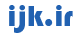
<style>
.page{position:relative;width:82px;height:35px;background:#ffffff}
.page>*{position:absolute;margin:0}
.t1{font:30px "Bauhaus93";color:#2161b1}
</style>
<div class="page">
<p class="t1" style="left:9px;top:5px;width:64px;height:28px">ijk.ir</p>
</div>
